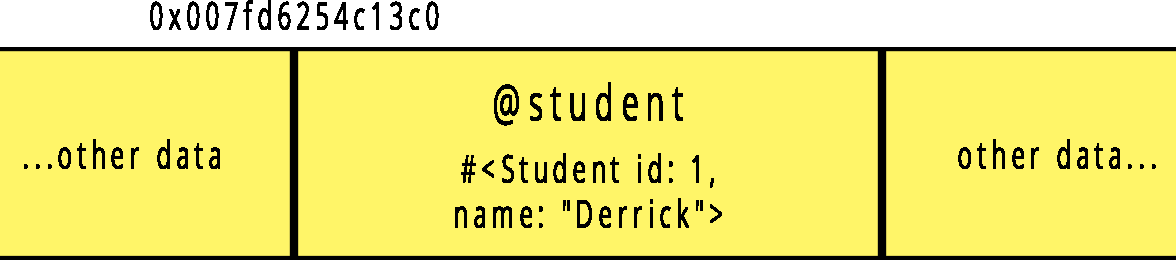
<style>
.page{position:relative;width:1176px;height:260px;background:#fff568}
.page>*{position:absolute;margin:0}
.t1{font:37.5px "OpenSans";letter-spacing:0.2em;color:#000000;font-weight:bold;scale:0.63 1}
.t2{font:50px "OpenSans";letter-spacing:0.2em;color:#000000;font-weight:bold;scale:0.63 1}
</style>
<div class="page">
<p class="t1" style="left:150px;top:0px;width:289px;height:30px">0x007fd6254c13c0</p>
<p class="t2" style="left:494px;top:82px;width:189px;height:44px">@student</p>
<p class="t1" style="left:24px;top:139px;width:196px;height:30px">...other data</p>
<p class="t1" style="left:958px;top:139px;width:198px;height:30px">other data...</p>
<p class="t1" style="left:455px;top:153px;width:267px;height:75px;text-align:center">#&lt;Student id: 1,<br>name: "Derrick"&gt;</p>
</div>
